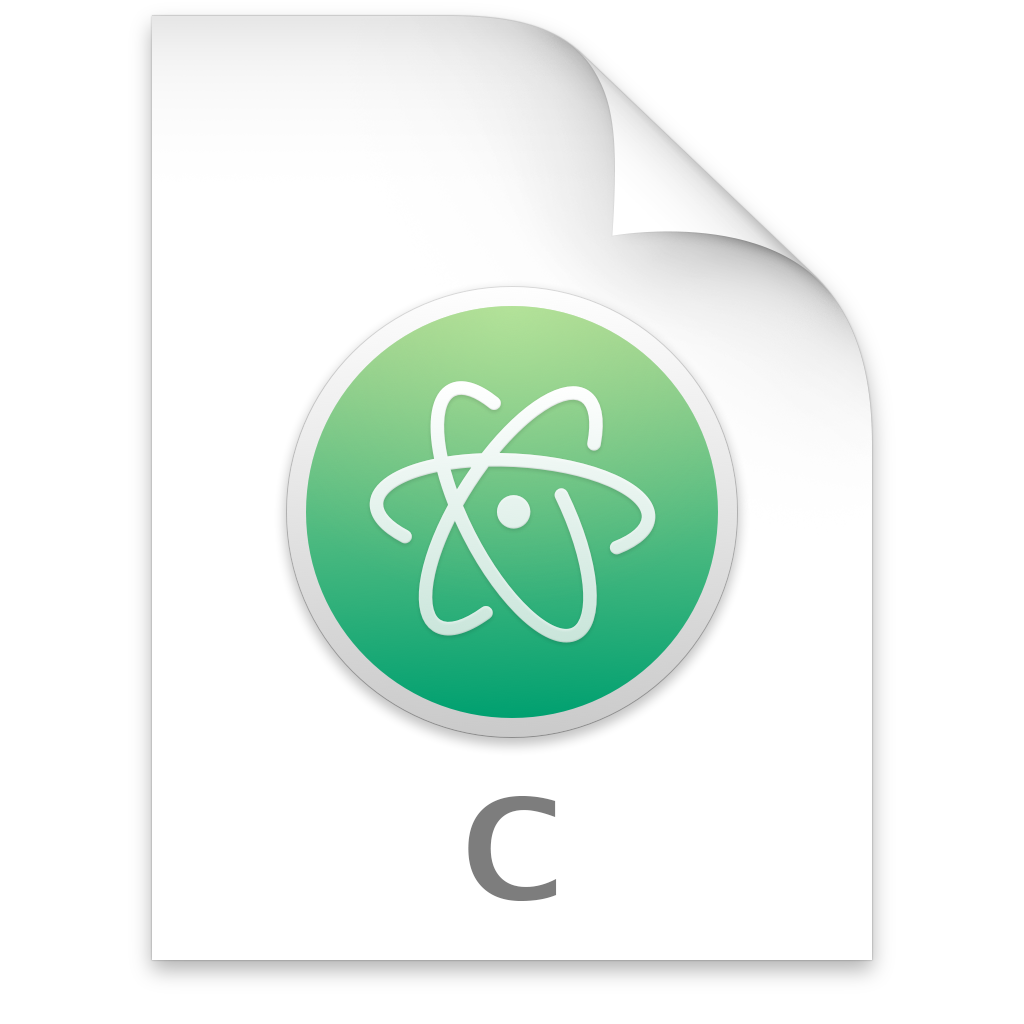
<style>
.page{position:relative;width:1024px;height:1024px;background:#ffffff}
.page>*{position:absolute;margin:0}
.t1{font:140px "LucidaGrande-Bold";color:#7d7d7d}
</style>
<div class="page">
<p class="t1" style="left:468px;top:796px;width:89px;height:105px">C</p>
</div>
